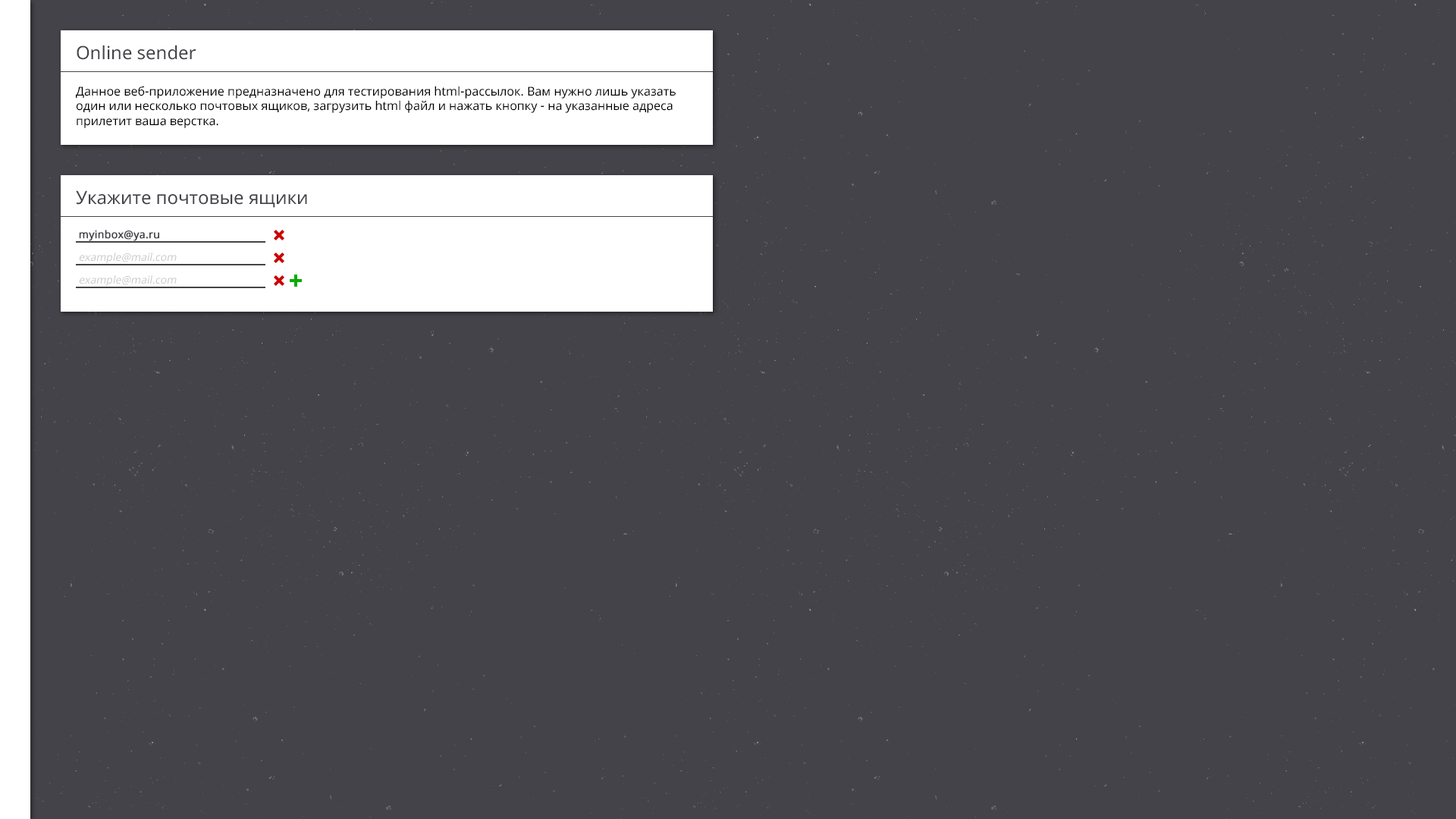
<style>
.page{position:relative;width:1456px;height:819px;background:#444349}
.page>*{position:absolute;margin:0}
.t1{font:12.1px "NotoSans";color:#000000}
.t2{font:18.2px "NotoSans";color:#444349}
.t3{font:10.6px "NotoSans";color:#444349;font-weight:bold}
.t4{font:10.6px "NotoSans";color:#cccccc;font-style:italic}
</style>
<div class="page">
<p class="t1" style="left:76px;top:45px;width:600px;height:83px"><span class="t2">Online sender<br><br></span>Данное веб-приложение предназначено для тестирования html-рассылок. Вам нужно лишь указать один или несколько почтовых ящиков, загрузить html файл и нажать кнопку - на указанные адреса прилетит ваша верстка.</p>
<p class="t2" style="left:76px;top:190px;width:231px;height:18px">Укажите почтовые ящики</p>
<p class="t3" style="left:79px;top:230px;width:80px;height:11px">myinbox@ya.ru</p>
<p class="t4" style="left:79px;top:253px;width:98px;height:11px">example@mail.com</p>
<p class="t4" style="left:79px;top:275px;width:98px;height:12px">example@mail.com</p>
</div>
